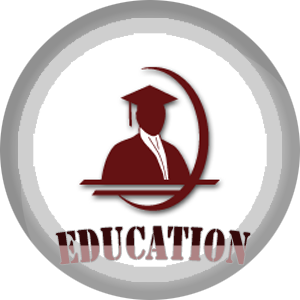
<style>
.page{position:relative;width:300px;height:300px;background:#ffffff}
.page>*{position:absolute;margin:0}
.t1{font:21px "StencilStd";text-transform:uppercase}
.t2{font:21px "PenChoov_X";text-transform:uppercase}
</style>
<div class="page">
<p class="t1" style="left:55px;top:226px;width:196px;height:39px;text-align:center"><span class="t2"><br></span>EDUCATION</p>
</div>
